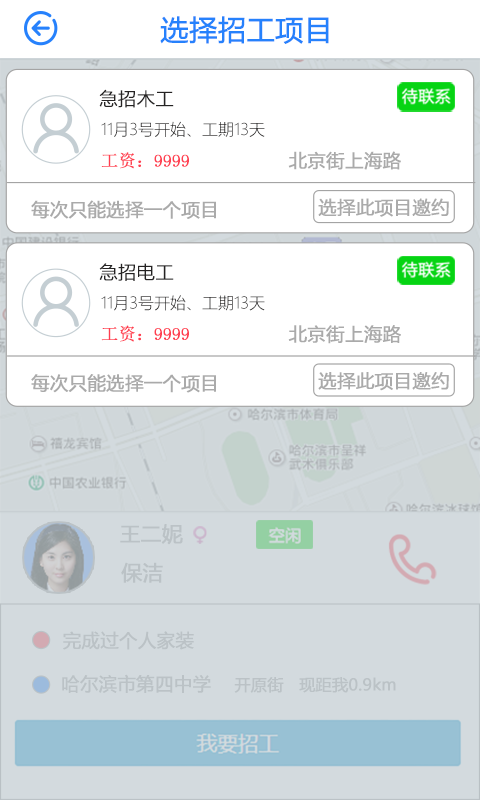
<style>
.page{position:relative;width:480px;height:800px;background:#ffffff}
.page>*{position:absolute;margin:0}
.t1{font:28px "MicrosoftYaHei";color:#2681fc;font-weight:bold}
.t2{font:18.3px "MicrosoftYaHeiLight";color:#252323;font-weight:bold}
.t3{font:16px "MicrosoftYaHeiLight";color:#252323}
.t4{font:17.1px "SimSun";color:#ff3e50;font-weight:bold}
.t5{font:18.3px "MicrosoftYaHei";color:#aaaaaa;font-weight:bold}
.t6{font:16px "MicrosoftYaHeiLight"}
.t7{font:20.6px "MicrosoftYaHei";color:#bbc2c6;font-weight:bold}
.t8{font:18.3px "MicrosoftYaHei";color:#bbc2c6;font-weight:bold}
.t9{font:16px "MicrosoftYaHei";color:#bbc2c6;font-weight:bold}
</style>
<div class="page">
<p class="t1" style="left:160px;top:16px;width:169px;height:28px">选择招工项目</p>
<p class="t2" style="left:99px;top:89px;width:75px;height:19px">急招木工</p>
<p class="t3" style="left:101px;top:121px;width:164px;height:16px">11月3号开始、工期13天</p>
<p class="t4" style="left:101px;top:152px;width:88px;height:17px">工资：9999</p>
<p class="t5" style="left:288px;top:151px;width:113px;height:19px">北京街上海路</p>
<p class="t5" style="left:318px;top:198px;width:131px;height:19px">选择此项目邀约</p>
<p class="t5" style="left:31px;top:200px;width:185px;height:19px">每次只能选择一个项目</p>
<p class="t2" style="left:99px;top:263px;width:75px;height:18px">急招电工</p>
<p class="t6" style="left:101px;top:295px;width:164px;height:16px">11月3号开始、工期13天</p>
<p class="t4" style="left:101px;top:325px;width:88px;height:17px">工资：9999</p>
<p class="t5" style="left:288px;top:325px;width:113px;height:19px">北京街上海路</p>
<p class="t5" style="left:31px;top:374px;width:185px;height:19px">每次只能选择一个项目</p>
<p class="t5" style="left:318px;top:372px;width:131px;height:19px">选择此项目邀约</p>
<p class="t7" style="left:120px;top:524px;width:63px;height:21px">王二妮</p>
<p class="t7" style="left:121px;top:562px;width:42px;height:21px">保洁</p>
<p class="t8" style="left:63px;top:631px;width:131px;height:19px">完成过个人家装</p>
<p class="t8" style="left:62px;top:674px;width:149px;height:19px">哈尔滨市第四中学</p>
<p class="t9" style="left:234px;top:677px;width:162px;height:16px">开原街   现距我0.9km</p>
</div>
